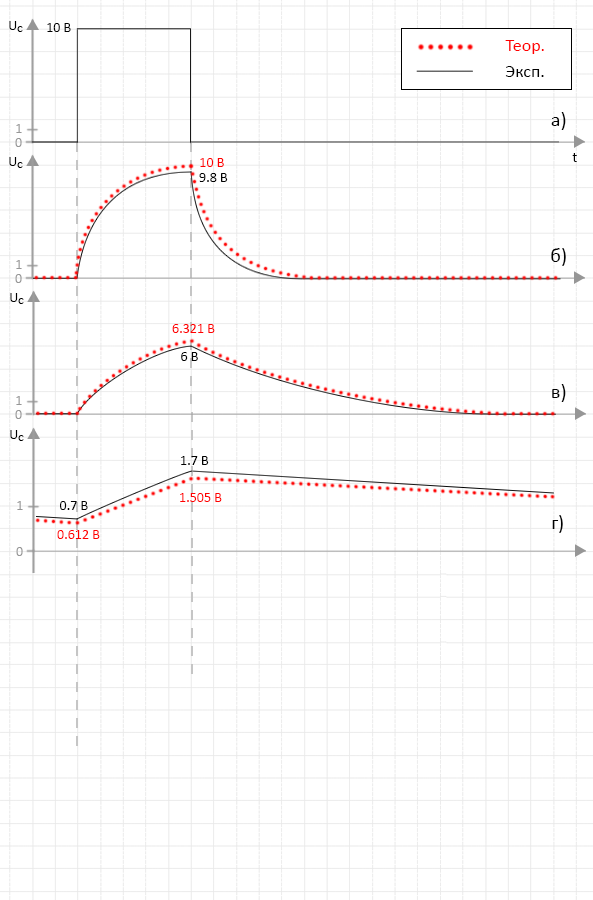
<style>
.page{position:relative;width:593px;height:900px;background:#ffffff}
.page>*{position:absolute;margin:0}
.t1{font:14px "Calibri";color:#000000}
.t2{font:10px "Calibri";color:#000000}
.t3{font:18px "Calibri";color:#ff0000}
.t4{font:18px "Calibri";color:#000000}
.t5{font:20px "Calibri";color:#000000}
.t6{font:14px "Calibri";color:#969696}
.t7{font:14px "Calibri";color:#ff0000}
</style>
<div class="page">
<p class="t1" style="left:9px;top:21px;width:8px;height:9px">U</p>
<p class="t2" style="left:17px;top:26px;width:6px;height:6px">C</p>
<p class="t1" style="left:47px;top:23px;width:24px;height:9px">10 В</p>
<p class="t3" style="left:505px;top:40px;width:39px;height:14px">Теор.</p>
<p class="t4" style="left:505px;top:66px;width:39px;height:11px">Эксп.</p>
<p class="t5" style="left:551px;top:112px;width:15px;height:18px">а)</p>
<p class="t6" style="left:16px;top:124px;width:6px;height:9px">1</p>
<p class="t6" style="left:15px;top:138px;width:7px;height:9px">0</p>
<p class="t1" style="left:9px;top:157px;width:8px;height:9px">U</p>
<p class="t7" style="left:200px;top:158px;width:24px;height:9px">10 В</p>
<p class="t1" style="left:572px;top:153px;width:5px;height:9px">t</p>
<p class="t2" style="left:17px;top:162px;width:6px;height:6px">C</p>
<p class="t1" style="left:199px;top:173px;width:29px;height:9px">9.8 В</p>
<p class="t5" style="left:551px;top:248px;width:15px;height:18px">б)</p>
<p class="t6" style="left:16px;top:260px;width:6px;height:9px">1</p>
<p class="t6" style="left:15px;top:274px;width:7px;height:9px">0</p>
<p class="t1" style="left:10px;top:293px;width:8px;height:9px">U</p>
<p class="t2" style="left:18px;top:298px;width:6px;height:6px">C</p>
<p class="t7" style="left:172px;top:324px;width:43px;height:9px">6.321 В</p>
<p class="t1" style="left:181px;top:352px;width:17px;height:9px">6 В</p>
<p class="t5" style="left:552px;top:384px;width:14px;height:18px">в)</p>
<p class="t6" style="left:16px;top:396px;width:6px;height:9px">1</p>
<p class="t6" style="left:15px;top:410px;width:7px;height:9px">0</p>
<p class="t1" style="left:10px;top:430px;width:8px;height:9px">U</p>
<p class="t2" style="left:18px;top:435px;width:6px;height:6px">C</p>
<p class="t1" style="left:181px;top:456px;width:28px;height:9px">1.7 В</p>
<p class="t7" style="left:180px;top:493px;width:42px;height:9px">1.505 В</p>
<p class="t6" style="left:17px;top:501px;width:6px;height:9px">1</p>
<p class="t1" style="left:60px;top:501px;width:28px;height:9px">0.7 В</p>
<p class="t5" style="left:552px;top:515px;width:11px;height:18px">г)</p>
<p class="t7" style="left:57px;top:530px;width:43px;height:9px">0.612 В</p>
<p class="t6" style="left:16px;top:547px;width:7px;height:9px">0</p>
</div>
